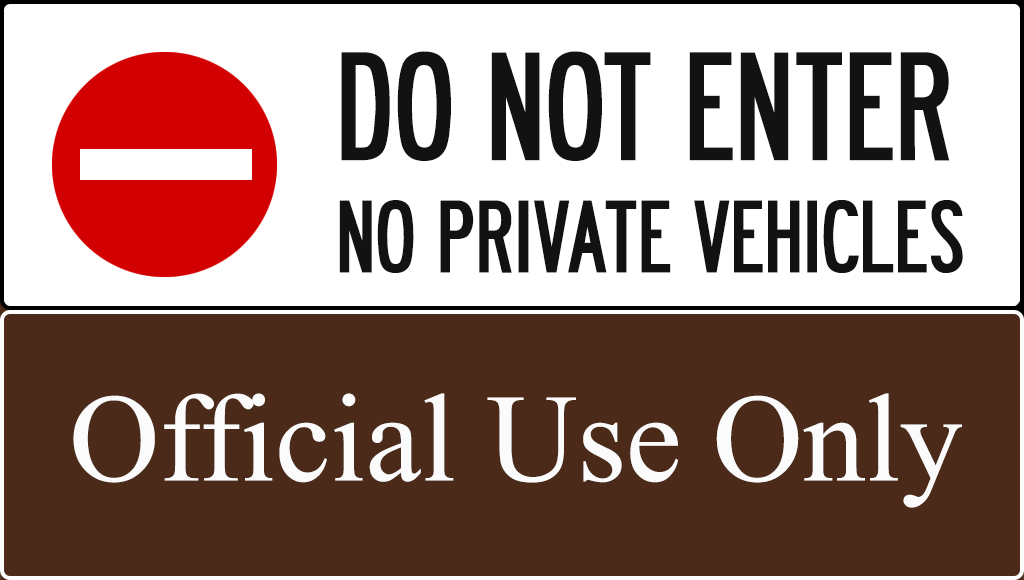
<style>
.page{position:relative;width:1024px;height:580px;background:#4c2a19}
.page>*{position:absolute;margin:0}
.t1{font:89.9px/112.3px "Roadway";color:#121212}
.t2{font:134.8px/112.3px "Roadway";color:#121212}
.t3{font:125px "IskoolaPota";color:#fbfbfb}
</style>
<div class="page">
<p class="t1" style="left:339px;top:51px;width:624px;height:222px"><span class="t2">DO NOT ENTER<br></span>NO PRIVATE VEHICLES</p>
<p class="t3" style="left:73px;top:393px;width:889px;height:115px">Official Use Only</p>
</div>
